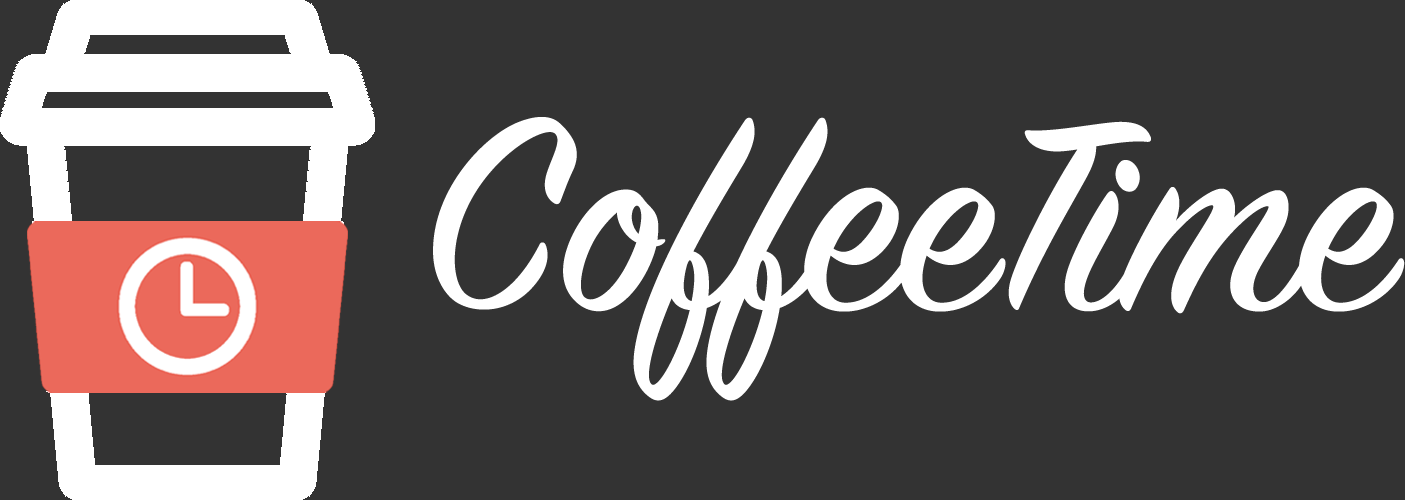
<style>
.page{position:relative;width:1405px;height:500px;background:#333333}
.page>*{position:absolute;margin:0}
.t1{font:300px "SignPainter-HouseScript";color:#ffffff}
</style>
<div class="page">
<p class="t1" style="left:433px;top:117px;width:972px;height:284px">CoffeeTime</p>
</div>
